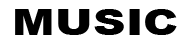
<style>
.page{position:relative;width:192px;height:43px;background:#ffffff}
.page>*{position:absolute;margin:0}
.t1{font:36px "Arial-Black";color:#000000;scale:1.26 1}
</style>
<div class="page">
<p class="t1" style="left:15px;top:9px;width:162px;height:26px">MUSIC</p>
</div>
